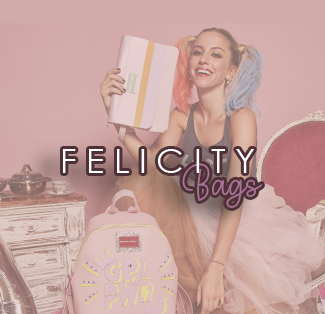
<style>
.page{position:relative;width:325px;height:314px}
.page>*{position:absolute;margin:0}
.t1{font:34.2px "CenturyGothic";color:#ffffff}
.t2{font:52px "HelloBunnyRegular";color:#aa7598}
</style>
<div class="page">
<p class="t1" style="left:63px;top:149px;width:191px;height:24px">F E L I C I T Y</p>
<p class="t2" style="left:182px;top:163px;width:80px;height:45px">Bags</p>
</div>
